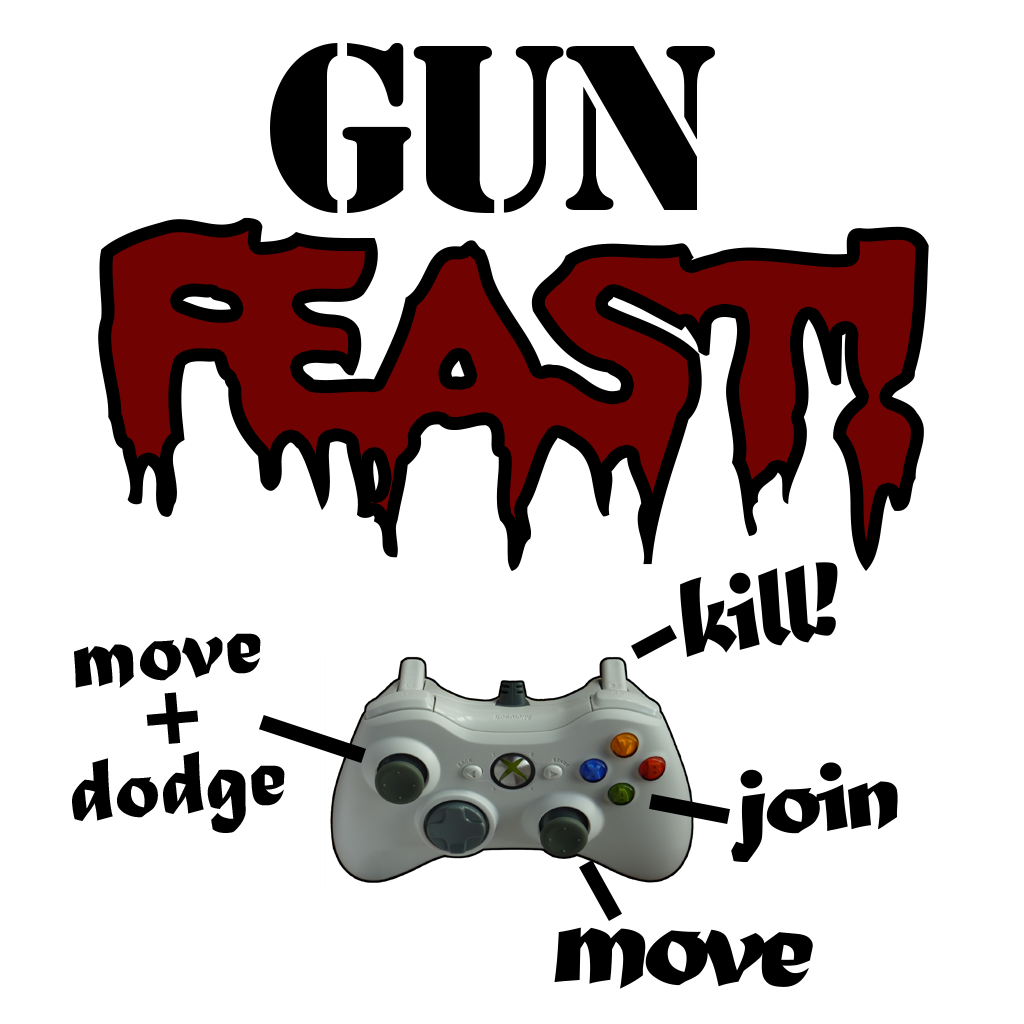
<style>
.page{position:relative;width:1024px;height:1024px;background:#ffffff}
.page>*{position:absolute;margin:0}
.t1{font:219px "StencilStd";letter-spacing:-0.06em;color:#000000}
.t2{font:372px "ROCKYAOE";letter-spacing:-0.06em}
.t3{font:400px "ROCKYAOE";letter-spacing:-0.06em}
.t4{font:394px "ROCKYAOE";letter-spacing:-0.06em}
.t5{font:115.9px "MaturaMTScriptCapitals";letter-spacing:-0.06em;color:#000000}
.t6{font:92px/67px "MaturaMTScriptCapitals";color:#000000}
.t7{font:102.8px "MaturaMTScriptCapitals";letter-spacing:-0.06em;color:#000000;scale:1.16 1}
.t8{font:126.4px "MaturaMTScriptCapitals";letter-spacing:-0.06em;color:#000000;scale:1.09 1}
</style>
<div class="page">
<p class="t1" style="left:270px;top:43px;width:445px;height:171px">GUN</p>
<p class="t2" style="left:98px;top:217px;width:831px;height:354px"><span class="t3">F</span>east<span class="t4">!</span></p>
<p class="t5" style="left:680px;top:562px;width:158px;height:95px;rotate:-7deg">kill!</p>
<p class="t6" style="left:72px;top:633px;width:213px;height:200px;text-align:center;rotate:-5deg">move<br>+<br>dodge</p>
<p class="t7" style="left:731px;top:762px;width:167px;height:100px;rotate:-5deg">join</p>
<p class="t8" style="left:554px;top:927px;width:259px;height:62px;rotate:1deg">move</p>
</div>
